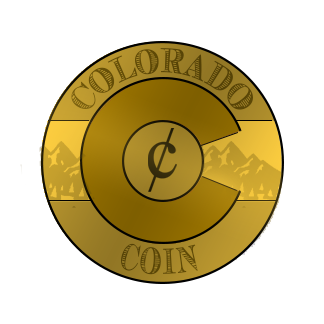
<style>
.page{position:relative;width:324px;height:324px;background:#ffffff}
.page>*{position:absolute;margin:0}
.t1{font:34.7px "Currency";letter-spacing:-0.025em;color:#6b5307;scale:0.5 1}
.t2{font:37.3px "Currency";letter-spacing:-0.025em;color:#6b5307;scale:0.5 1}
</style>
<div class="page">
<p class="t1" style="left:71px;top:48px;width:182px;height:62px;text-align:center">COLORADO</p>
<p class="t2" style="left:121px;top:243px;width:77px;height:32px">COIN</p>
</div>
